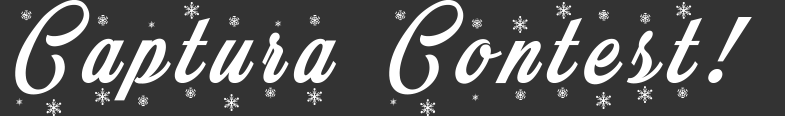
<style>
.page{position:relative;width:785px;height:116px;background:#333333}
.page>*{position:absolute;margin:0}
.t1{font:120px "MerryChristmasFlake";letter-spacing:0.1em;color:#ffffff}
</style>
<div class="page">
<p class="t1" style="left:15px;top:0px;width:737px;height:116px">Captura Contest!</p>
</div>
